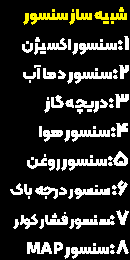
<style>
.page{position:relative;width:130px;height:260px;background:#000000}
.page>*{position:absolute;margin:0}
.t1{font:14.8px/29.2px "Kalameh-Black";letter-spacing:-0.01em;color:#ffffff;scale:1.04 1}
.t2{font:16.5px/29.2px "Kalameh-Black";letter-spacing:-0.01em;color:#fff600;scale:1.04 1}
.t3{font:19.8px/29.2px "Kalameh-Black";letter-spacing:-0.01em;color:#ffffff;scale:1.04 1}
.t4{font:16.5px/29.2px "Kalameh-Black";letter-spacing:-0.01em;color:#ffffff;scale:1.04 1}
.t5{font:15.5px/29.2px "Kalameh-Black";letter-spacing:-0.01em;color:#ffffff;scale:1.04 1}
</style>
<div class="page">
<p class="t1" style="left:10px;top:7px;width:119px;height:252px"><span class="t2"> شبیه ساز سنسور  <br></span><span class="t3">1:</span><span class="t4">سنسور اکسیژن<br></span><span class="t3">2:</span><span class="t4">سنسور دما آب<br></span><span class="t3">3:</span><span class="t4">دریچه گاز<br></span><span class="t3">4:</span><span class="t4">سنسور هوا<br></span><span class="t3">5:</span><span class="t4">سنسور روغن<br></span><span class="t3">6:</span><span class="t5">سنسور درجه باک<br></span><span class="t3">7:</span>سنسور فشار کولر<br><span class="t3">8:</span><span class="t4">سنسور MAP</span></p>
</div>
